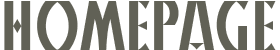
<style>
.page{position:relative;width:280px;height:50px;background:#ffffff}
.page>*{position:absolute;margin:0}
.t1{font:69.4px "KinoMT";color:#616156}
</style>
<div class="page">
<p class="t1" style="left:4px;top:1px;width:272px;height:49px">HOMEPAGE</p>
</div>
